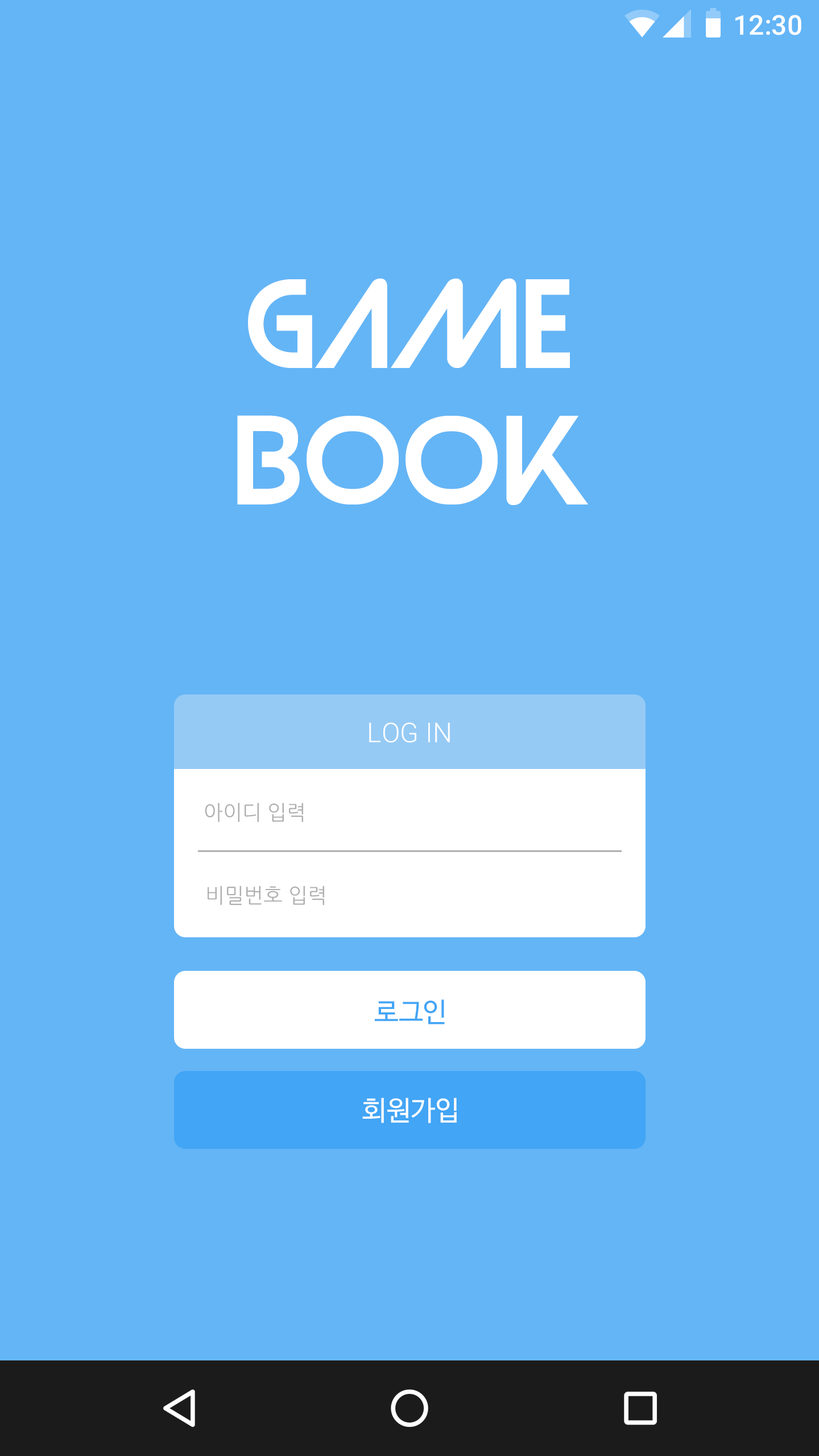
<style>
.page{position:relative;width:819px;height:1456px;background:#64b5f6}
.page>*{position:absolute;margin:0}
.t1{font:27.3px "Roboto-Medium";color:#ffffff}
.t2{font:113.7px "Strasua-Regular";color:#ffffff}
.t3{font:27.3px "Roboto-Light";color:#fefefe}
.t4{font:20.5px "NanumGothic";color:#afafaf}
.t5{font:27.3px "NanumBarunGothic";color:#42a5f5}
.t6{font:27.3px "NanumBarunGothic";color:#ffffff}
</style>
<div class="page">
<p class="t1" style="left:735px;top:15px;width:66px;height:20px">12:30</p>
<p class="t2" style="left:237px;top:278px;width:351px;height:227px;text-align:center">GAME<br>BOOK</p>
<p class="t3" style="left:369px;top:722px;width:81px;height:21px">LOG IN</p>
<p class="t4" style="left:205px;top:802px;width:98px;height:20px">아이디 입력</p>
<p class="t4" style="left:208px;top:886px;width:116px;height:19px">비밀번호 입력</p>
<p class="t5" style="left:375px;top:999px;width:70px;height:25px">로그인</p>
<p class="t6" style="left:362px;top:1098px;width:95px;height:25px">회원가입</p>
</div>
